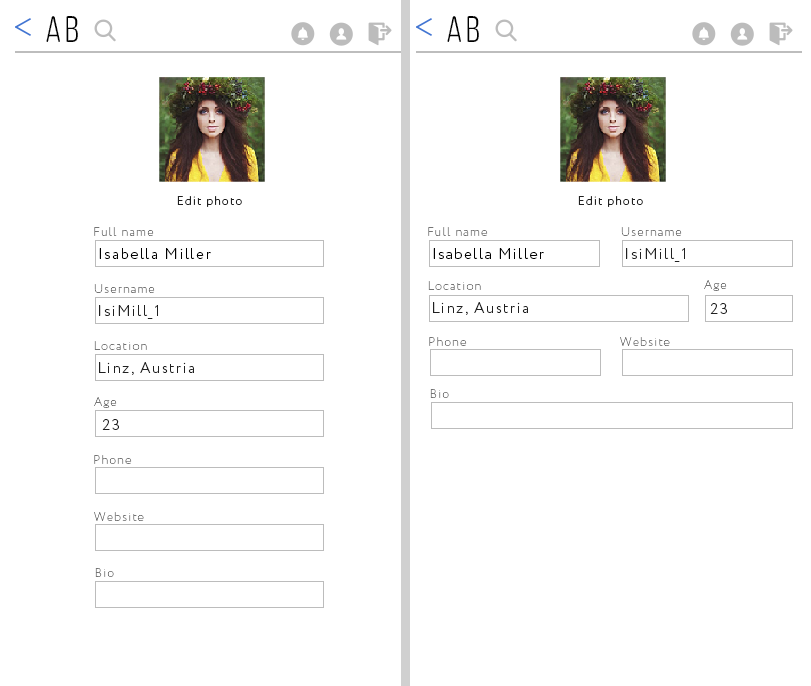
<style>
.page{position:relative;width:811px;height:686px;background:#ffffff}
.page>*{position:absolute;margin:0}
.t1{font:37px "ClutchSans-Regular";letter-spacing:0.1em;color:#000000}
.t2{font:12px "Circe-Light";letter-spacing:0.1em;color:#202020}
.t3{font:12px "Circe-ExtraLight";letter-spacing:0.1em;color:#747474}
.t4{font:12.2px "Circe-ExtraLight";letter-spacing:0.1em;color:#747474}
.t5{font:15px "Circe-Light";letter-spacing:0.1em;color:#000000}
.t6{font:15.2px "Circe-Light";letter-spacing:0.1em;color:#000000}
.t7{font:15px "Circe-Light";letter-spacing:0.1em;color:#202020}
</style>
<div class="page">
<p class="t1" style="left:46px;top:16px;width:32px;height:26px">Ab</p>
<p class="t1" style="left:447px;top:16px;width:32px;height:26px">Ab</p>
<p class="t2" style="left:177px;top:196px;width:65px;height:11px">Edit photo</p>
<p class="t2" style="left:578px;top:196px;width:65px;height:11px">Edit photo</p>
<p class="t3" style="left:94px;top:227px;width:60px;height:9px">Full name</p>
<p class="t4" style="left:428px;top:227px;width:60px;height:9px">Full name</p>
<p class="t3" style="left:621px;top:227px;width:61px;height:9px">Username</p>
<p class="t5" style="left:99px;top:248px;width:112px;height:11px">Isabella Miller</p>
<p class="t6" style="left:433px;top:248px;width:111px;height:11px">Isabella Miller</p>
<p class="t7" style="left:626px;top:248px;width:59px;height:14px">IsiMill_1</p>
<p class="t3" style="left:428px;top:281px;width:53px;height:9px">Location</p>
<p class="t3" style="left:704px;top:280px;width:23px;height:11px">Age</p>
<p class="t3" style="left:94px;top:284px;width:61px;height:9px">Username</p>
<p class="t7" style="left:99px;top:305px;width:59px;height:14px">IsiMill_1</p>
<p class="t7" style="left:433px;top:302px;width:95px;height:13px">Linz, Austria</p>
<p class="t7" style="left:710px;top:303px;width:17px;height:11px">23</p>
<p class="t3" style="left:94px;top:341px;width:53px;height:9px">Location</p>
<p class="t3" style="left:429px;top:337px;width:38px;height:9px">Phone</p>
<p class="t3" style="left:620px;top:337px;width:50px;height:9px">Website</p>
<p class="t7" style="left:99px;top:362px;width:95px;height:13px">Linz, Austria</p>
<p class="t3" style="left:430px;top:389px;width:19px;height:9px">Bio</p>
<p class="t3" style="left:94px;top:397px;width:23px;height:11px">Age</p>
<p class="t7" style="left:102px;top:419px;width:17px;height:11px">23</p>
<p class="t3" style="left:94px;top:455px;width:38px;height:9px">Phone</p>
<p class="t3" style="left:94px;top:512px;width:50px;height:9px">Website</p>
<p class="t3" style="left:95px;top:568px;width:19px;height:9px">Bio</p>
</div>
